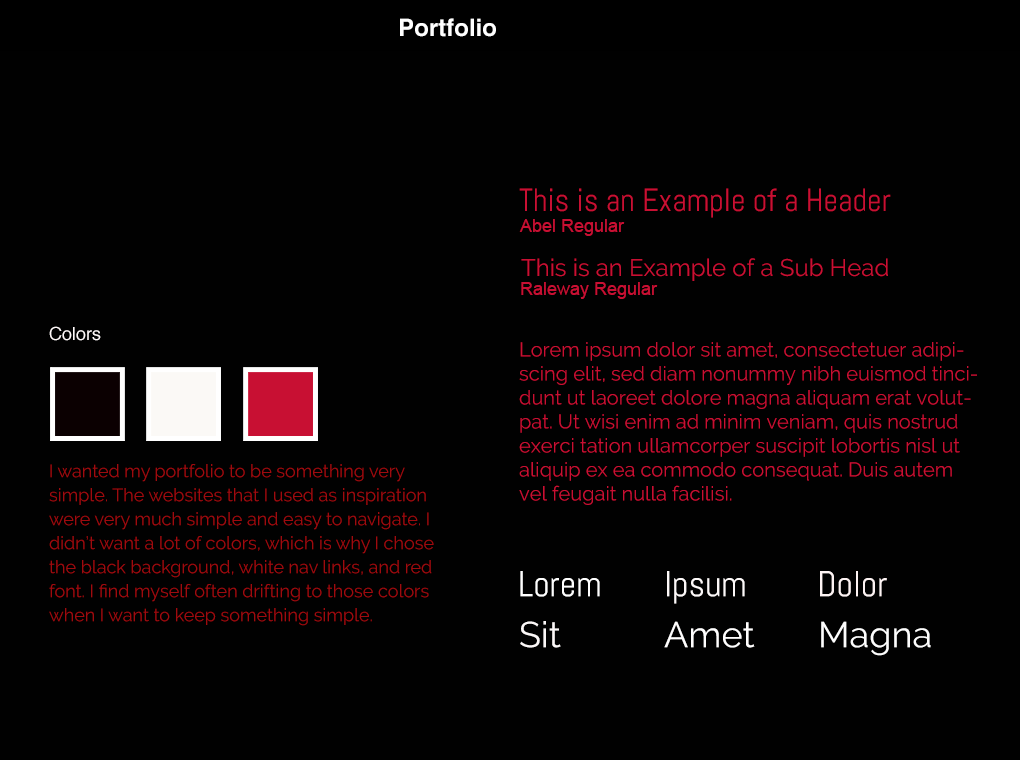
<style>
.page{position:relative;width:1020px;height:760px;background:#010101}
.page>*{position:absolute;margin:0}
.t1{font:24px "Helvetica-Bold";color:#ffffff}
.t2{font:32px "Abel-Regular";color:#c81033}
.t3{font:18px "ArialMT";color:#c81033}
.t4{font:24px "Raleway-Regular";color:#c81033}
.t5{font:18px "Helvetica";color:#fdf7f7}
.t6{font:20px/24px "Raleway-Regular";color:#c81033}
.t7{font:18px/24px "Raleway-Regular";color:#9e0b0f}
.t8{font:36px "Abel-Regular";color:#ffffff}
.t9{font:36px "Abel-Regular";color:#fdf9f9}
.t10{font:36px "Abel-Regular";color:#fdf3f3}
.t11{font:36px "Raleway-Regular";color:#fbf7f7}
.t12{font:36px "Raleway-Regular";color:#fffefe}
.t13{font:36px "Raleway-Regular";color:#fdfdfd}
</style>
<div class="page">
<p class="t1" style="left:400px;top:18px;width:96px;height:19px">Portfolio</p>
<p class="t2" style="left:519px;top:188px;width:372px;height:30px">This is an Example of a Header</p>
<p class="t3" style="left:519px;top:219px;width:106px;height:17px">Abel Regular</p>
<p class="t4" style="left:521px;top:258px;width:367px;height:23px">This is an Example of a Sub Head</p>
<p class="t3" style="left:521px;top:282px;width:137px;height:17px">Raleway Regular</p>
<p class="t5" style="left:49px;top:326px;width:52px;height:15px">Colors</p>
<p class="t6" style="left:519px;top:342px;width:458px;height:163px">Lorem ipsum dolor sit amet, consectetuer adipiscing elit, sed diam nonummy nibh euismod tincidunt ut laoreet dolore magna aliquam erat volutpat. Ut wisi enim ad minim veniam, quis nostrud exerci tation ullamcorper suscipit lobortis nisl ut aliquip ex ea commodo consequat. Duis autem vel feugait nulla facilisi.</p>
<p class="t7" style="left:49px;top:464px;width:385px;height:162px">I wanted my portfolio to be something very simple. The websites that I used as inspiration were very much simple and easy to navigate. I didn’t want a lot of colors, which is why I chose the black background, white nav links, and red font. I find myself often drifting to those colors when I want to keep something simple.</p>
<p class="t8" style="left:520px;top:571px;width:80px;height:26px">Lorem</p>
<p class="t9" style="left:667px;top:571px;width:78px;height:33px">Ipsum</p>
<p class="t10" style="left:820px;top:571px;width:67px;height:26px">Dolor</p>
<p class="t11" style="left:520px;top:621px;width:41px;height:27px">Sit</p>
<p class="t12" style="left:664px;top:621px;width:91px;height:27px">Amet</p>
<p class="t13" style="left:821px;top:621px;width:110px;height:35px">Magna</p>
</div>
